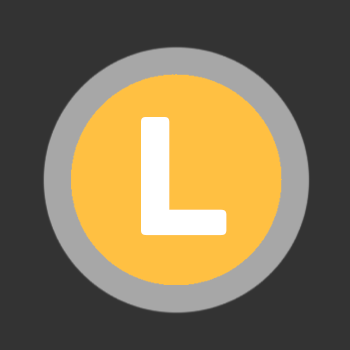
<style>
.page{position:relative;width:350px;height:350px;background:#333333}
.page>*{position:absolute;margin:0}
.t1{font:180px "Archive";color:#ffffff}
</style>
<div class="page">
<p class="t1" style="left:141px;top:117px;width:86px;height:119px">L</p>
</div>
